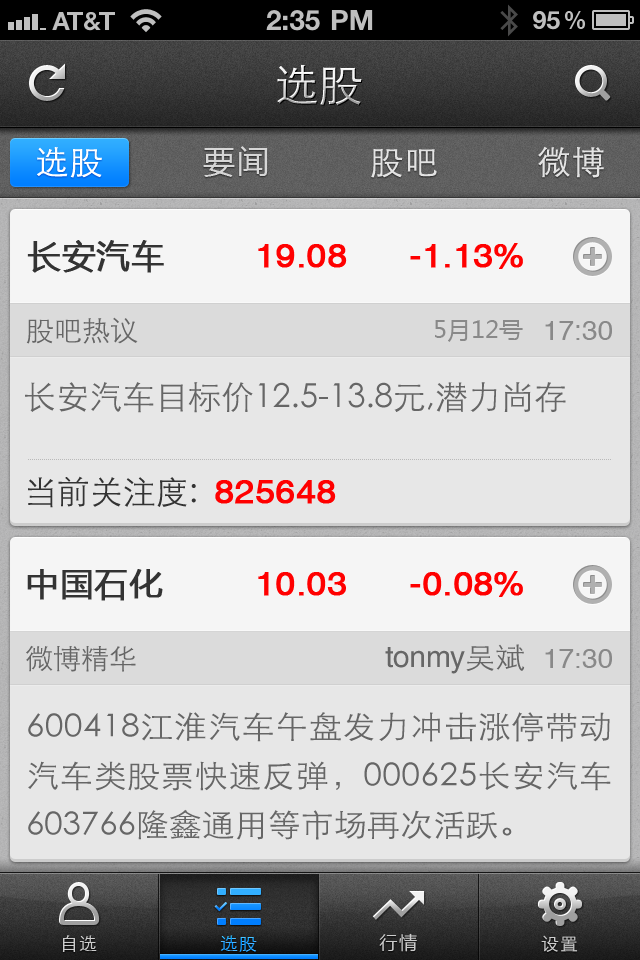
<style>
.page{position:relative;width:640px;height:960px;background:#e7e7e7}
.page>*{position:absolute;margin:0}
.t1{font:44px "STXihei";letter-spacing:0.005em}
.t2{font:33px "STXihei";letter-spacing:0.05em;color:#ffffff}
.t3{font:32px "MicrosoftYaHei";letter-spacing:0.05em;color:#d6d6d6}
.t4{font:33px "STXihei";letter-spacing:0.05em;color:#e3e3e3}
.t5{font:33px "MicrosoftYaHei";letter-spacing:0.025em;color:#333333;font-weight:bold}
.t6{font:33.2px "HelveticaCE-Regular";color:#ff0000;font-weight:bold;scale:1.05 1}
.t7{font:28px "STXihei";color:#666666}
.t8{font:24px "MicrosoftYaHei";color:#898989}
.t9{font:28px "HelveticaCE-Regular";color:#898989}
.t10{font:33px "STXihei";color:#666666}
.t11{font:33px "STXihei";color:#333333}
.t12{font:30px "HelveticaCE-Regular";color:#666666}
.t13{font:30px "STXihei";color:#666666}
.t14{font:31.3px/49px "STXihei";color:#666666;scale:1.05 1}
.t15{font:18px "STXihei";letter-spacing:0.05em;color:#cccccc}
.t16{font:18px "STXihei";letter-spacing:0.05em}
.t17{font:18px "MicrosoftYaHei";letter-spacing:0.1em;color:#cccccc}
</style>
<div class="page">
<p class="t1" style="left:277px;top:64px;width:85px;height:42px">选股</p>
<p class="t2" style="left:37px;top:147px;width:65px;height:31px">选股</p>
<p class="t3" style="left:203px;top:146px;width:65px;height:31px">要闻</p>
<p class="t4" style="left:371px;top:149px;width:66px;height:29px">股吧</p>
<p class="t4" style="left:538px;top:146px;width:66px;height:32px">微博</p>
<p class="t5" style="left:27px;top:240px;width:137px;height:33px">长安汽车</p>
<p class="t6" style="left:258px;top:244px;width:89px;height:24px">19.08</p>
<p class="t6" style="left:410px;top:243px;width:113px;height:26px">-1.13%</p>
<p class="t7" style="left:26px;top:317px;width:112px;height:27px">股吧热议</p>
<p class="t8" style="left:435px;top:320px;width:88px;height:22px">5月12号</p>
<p class="t9" style="left:545px;top:321px;width:67px;height:19px">17:30</p>
<p class="t10" style="left:25px;top:382px;width:541px;height:31px">长安汽车目标价12.5-13.8元,潜力尚存</p>
<p class="t11" style="left:28px;top:476px;width:168px;height:32px">当前关注度:</p>
<p class="t6" style="left:215px;top:480px;width:121px;height:24px">825648</p>
<p class="t5" style="left:27px;top:569px;width:136px;height:32px">中国石化</p>
<p class="t6" style="left:258px;top:572px;width:88px;height:24px">10.03</p>
<p class="t6" style="left:410px;top:571px;width:113px;height:26px">-0.08%</p>
<p class="t7" style="left:26px;top:645px;width:110px;height:27px">微博精华</p>
<p class="t12" style="left:385px;top:644px;width:140px;height:30px">tonmy<span class="t13">吴斌</span></p>
<p class="t9" style="left:545px;top:649px;width:67px;height:19px">17:30</p>
<p class="t14" style="left:28px;top:712px;width:583px;height:128px;text-align:justify">600418江淮汽车午盘发力冲击涨停带动汽车类股票快速反弹，000625长安汽车603766隆鑫通用等市场再次活跃。</p>
<p class="t15" style="left:62px;top:935px;width:35px;height:17px">自选</p>
<p class="t16" style="left:220px;top:935px;width:37px;height:17px">选股</p>
<p class="t17" style="left:379px;top:933px;width:38px;height:19px">行情</p>
<p class="t15" style="left:541px;top:935px;width:37px;height:17px">设置</p>
</div>
